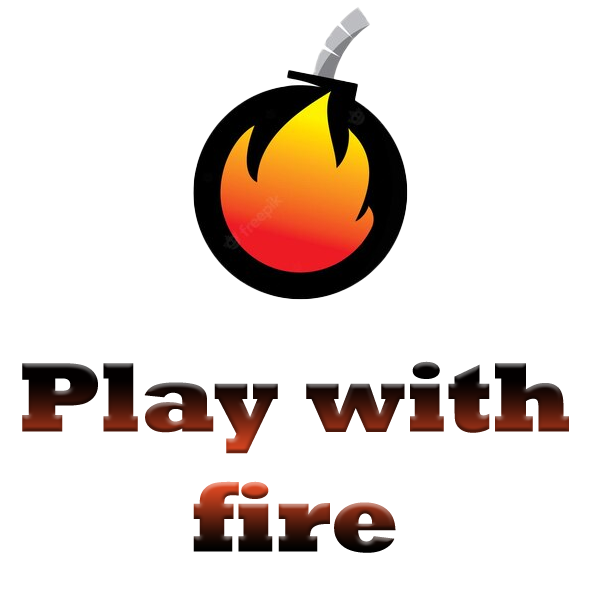
<style>
.page{position:relative;width:600px;height:600px;background:#ffffff}
.page>*{position:absolute;margin:0}
.t1{font:100px "Rockwell-ExtraBold"}
</style>
<div class="page">
<p class="t1" style="left:22px;top:361px;width:547px;height:192px;text-align:center">Play with<br>fire</p>
</div>
